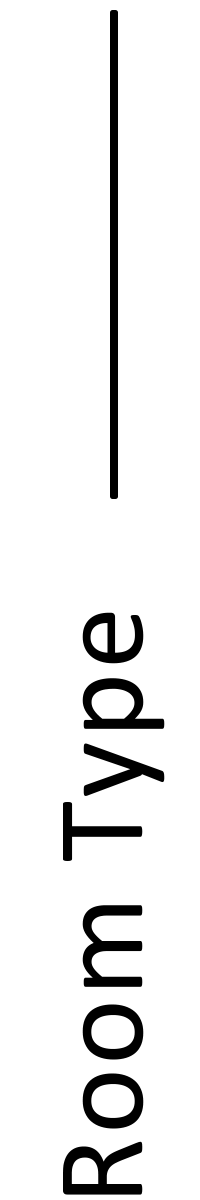
<style>
.page{position:relative;width:200px;height:1200px;background:#ffffff}
.page>*{position:absolute;margin:0}
.t1{font:125px "Calibri";letter-spacing:0.025em;color:#000000}
</style>
<div class="page">
<p class="t1" style="left:63px;top:612px;width:102px;height:583px;rotate:-90deg">Room Type</p>
</div>
